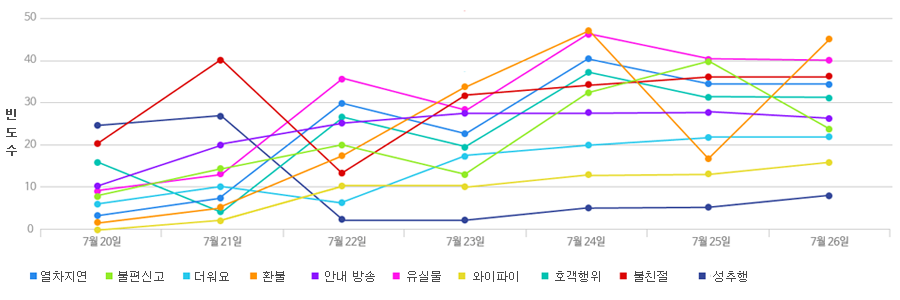
<style>
.page{position:relative;width:900px;height:300px;background:#ffffff}
.page>*{position:absolute;margin:0}
.t1{font:12px/18px "Dotum";color:#494949;font-weight:bold}
.t2{font:12px "Dotum";color:#494949}
</style>
<div class="page">
<p class="t1" style="left:6px;top:109px;width:11px;height:47px">빈<br>도<br>수</p>
<p class="t2" style="left:41px;top:271px;width:45px;height:11px">열차지연</p>
<p class="t2" style="left:118px;top:271px;width:46px;height:11px">불편신고</p>
<p class="t2" style="left:195px;top:271px;width:34px;height:11px">더워요</p>
<p class="t2" style="left:263px;top:271px;width:22px;height:11px">환불</p>
<p class="t2" style="left:325px;top:271px;width:50px;height:11px">안내 방송</p>
<p class="t2" style="left:407px;top:271px;width:34px;height:11px">유실물</p>
<p class="t2" style="left:473px;top:271px;width:45px;height:11px">와이파이</p>
<p class="t2" style="left:555px;top:271px;width:45px;height:11px">호객행위</p>
<p class="t2" style="left:634px;top:271px;width:33px;height:11px">불친절</p>
<p class="t2" style="left:713px;top:271px;width:34px;height:11px">성추행</p>
</div>
